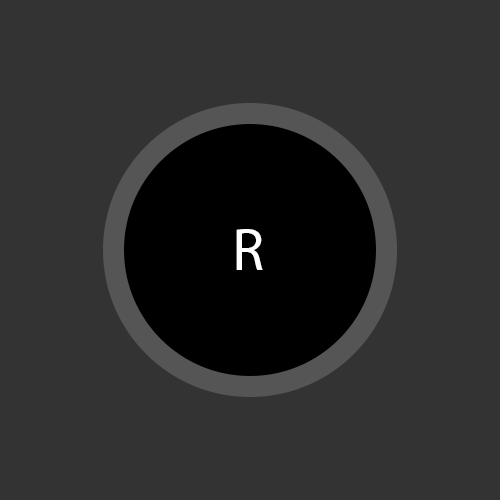
<style>
.page{position:relative;width:500px;height:500px;background:#333333}
.page>*{position:absolute;margin:0}
.t1{font:60px "MyriadPro-Regular";color:#ffffff}
</style>
<div class="page">
<p class="t1" style="left:236px;top:229px;width:27px;height:41px">R</p>
</div>
